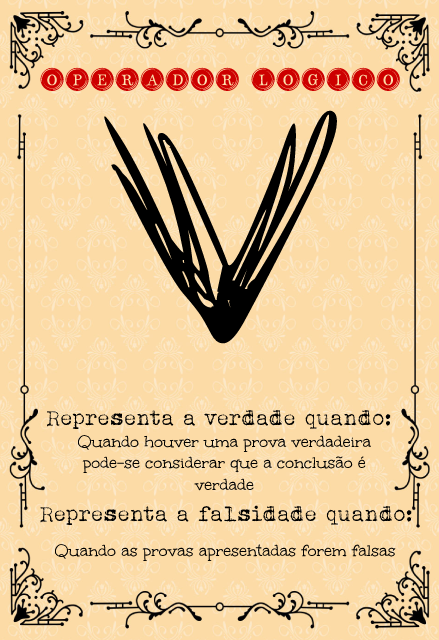
<style>
.page{position:relative;width:439px;height:640px;background:#fcdba6}
.page>*{position:absolute;margin:0}
.t1{font:30.9px "TypeKeysFilled";color:#cd0000}
.t2{font:247.5px "Goaroundthebooks2022";color:#000000;scale:1.46 1}
.t3{font:22px "AlbertsthalTypewriter";color:#000000}
.t4{font:18px "Unkempt-Regular";color:#000000}
</style>
<div class="page">
<p class="t1" style="left:40px;top:67px;width:360px;height:24px">Operador Logico</p>
<p class="t2" style="left:104px;top:110px;width:233px;height:234px">V</p>
<p class="t3" style="left:46px;top:410px;width:345px;height:20px">Representa a verdade quando:</p>
<p class="t4" style="left:77px;top:435px;width:295px;height:56px;text-align:center">Quando houver uma prova verdadeira<br>pode-se considerar que a conclusão é<br>verdade</p>
<p class="t3" style="left:40px;top:505px;width:372px;height:21px">Representa a falsidade quando:</p>
<p class="t4" style="left:54px;top:544px;width:342px;height:17px">Quando as provas apresentadas forem falsas</p>
</div>
